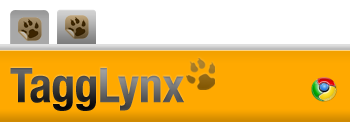
<style>
.page{position:relative;width:350px;height:122px;background:#ffffff}
.page>*{position:absolute;margin:0}
.t1{font:48px "HelveticaNeue-CondensedBold"}
</style>
<div class="page">
<p class="t1" style="left:10px;top:68px;width:174px;height:43px">TaggLynx</p>
</div>
